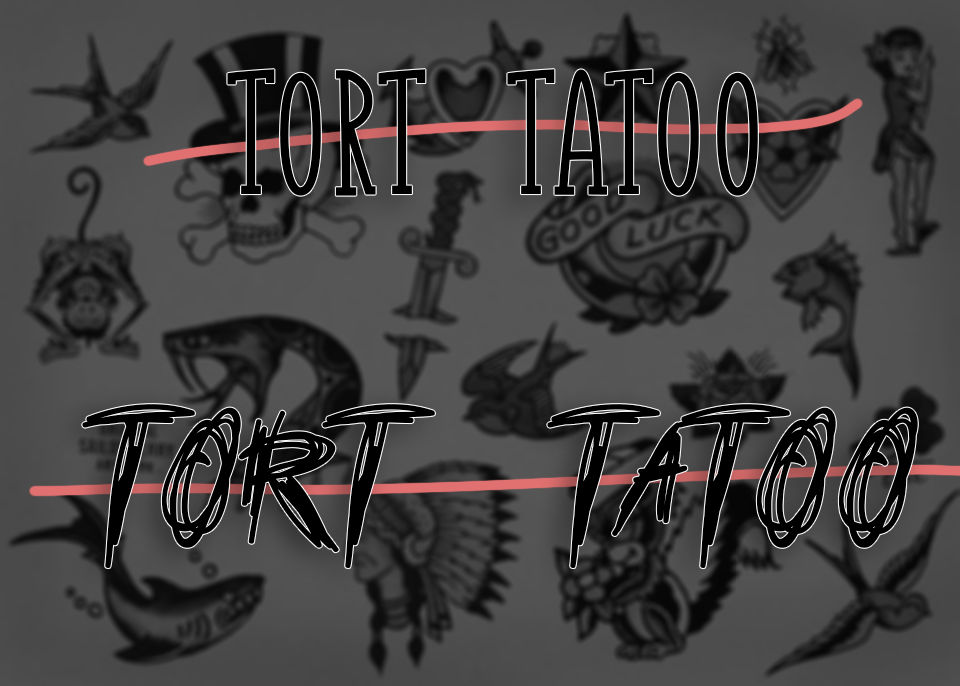
<style>
.page{position:relative;width:960px;height:686px}
.page>*{position:absolute;margin:0}
.t1{font:168px "MonlySerif-Bold";letter-spacing:0.01em;color:#000000;text-transform:uppercase}
.t2{font:168px "BlueApril";letter-spacing:0.01em;color:#000000;text-transform:uppercase}
</style>
<div class="page">
<p class="t1" style="left:227px;top:69px;width:531px;height:127px">Tort   tatoo</p>
<p class="t2" style="left:82px;top:404px;width:836px;height:165px">Tort   tatoo</p>
</div>
